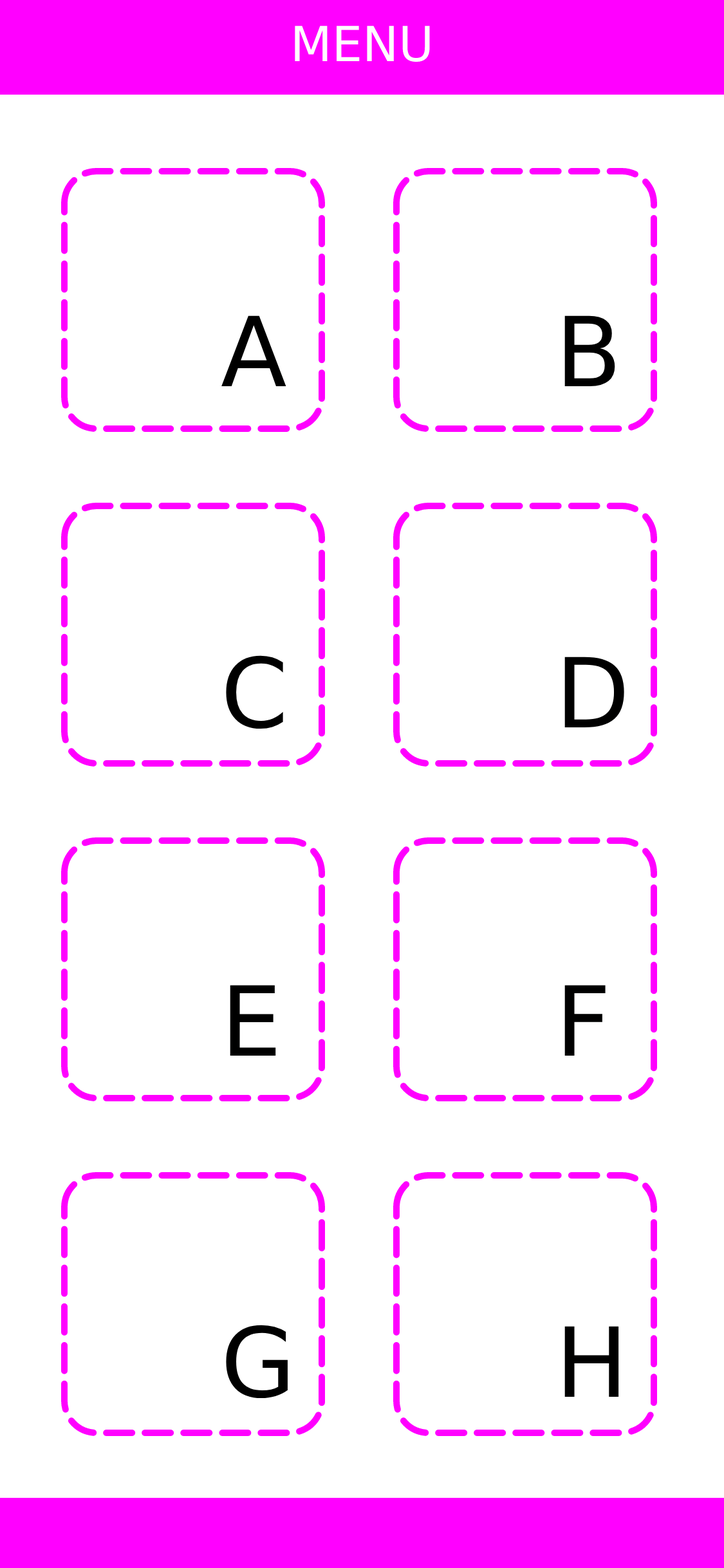
<style>
.page{position:relative;width:724px;height:1568px;background:#ffffff}
.page>*{position:absolute;margin:0}
.t1{font:48.3px "DejaVuSans";color:#ffffff}
.t2{font:96.6px "DejaVuSans";color:#000000}
</style>
<div class="page">
<p class="t1" style="left:295px;top:26px;width:135px;height:36px">MENU</p>
<p class="t2" style="left:221px;top:315px;width:65px;height:71px">A</p>
<p class="t2" style="left:565px;top:315px;width:50px;height:71px">B</p>
<p class="t2" style="left:226px;top:655px;width:57px;height:74px">C</p>
<p class="t2" style="left:565px;top:657px;width:59px;height:70px">D</p>
<p class="t2" style="left:230px;top:985px;width:46px;height:71px">E</p>
<p class="t2" style="left:565px;top:985px;width:41px;height:71px">F</p>
<p class="t2" style="left:226px;top:1325px;width:62px;height:73px">G</p>
<p class="t2" style="left:565px;top:1326px;width:54px;height:71px">H</p>
</div>
